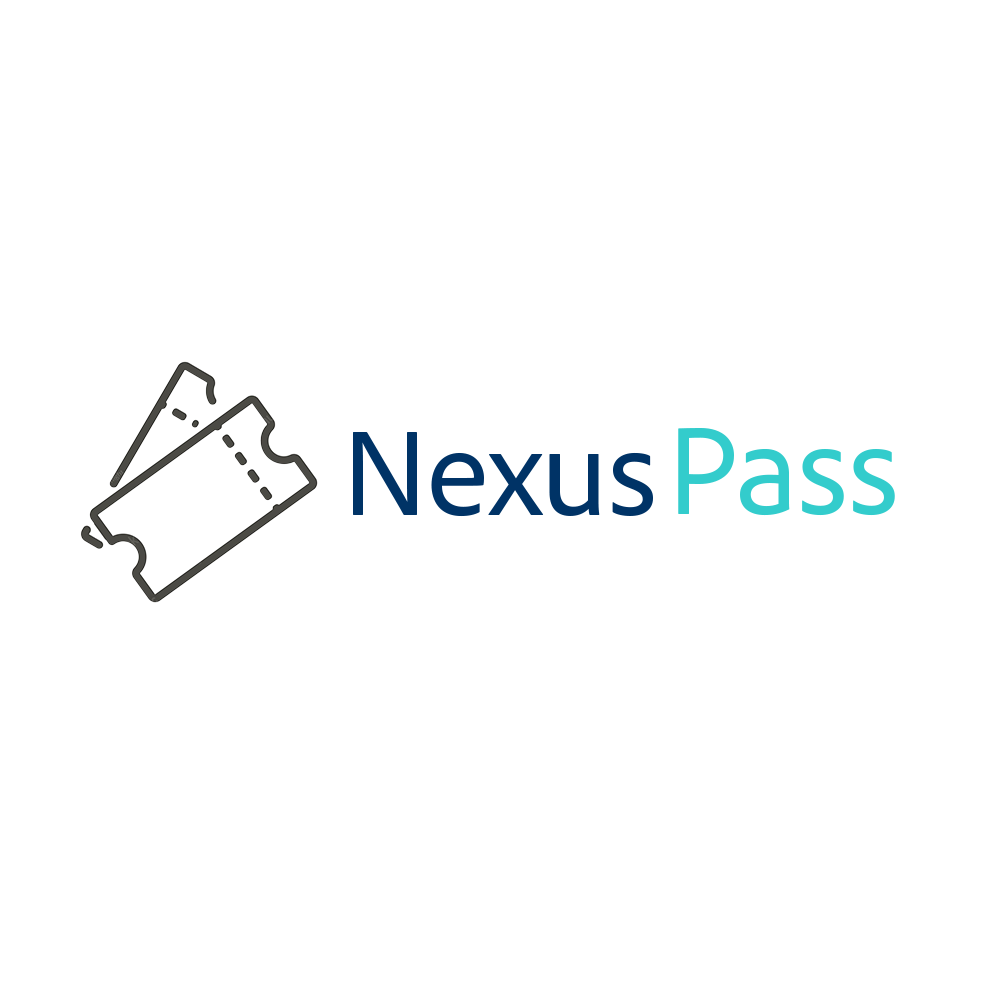
<style>
.page{position:relative;width:1000px;height:1000px;background:#ffffff}
.page>*{position:absolute;margin:0}
.t1{font:125.5px "AdobeClean-Regular";color:#003366}
.t2{font:130.8px "AdobeClean-Regular";color:#33cccc}
</style>
<div class="page">
<p class="t1" style="left:353px;top:432px;width:300px;height:85px">Nexus</p>
<p class="t2" style="left:678px;top:428px;width:217px;height:88px">Pass</p>
</div>
